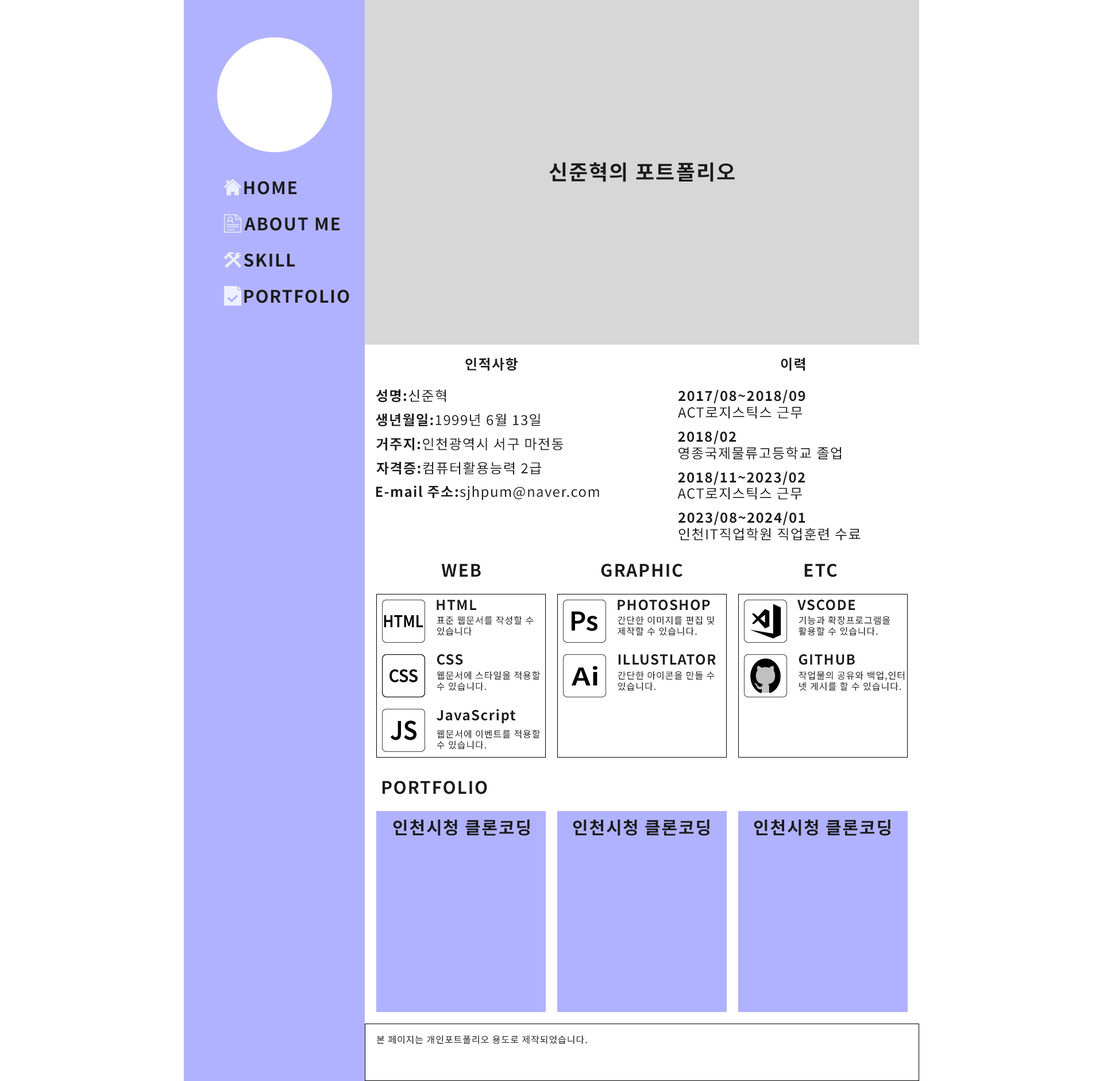
<style>
.page{position:relative;width:1103px;height:1081px;background:#ffffff}
.page>*{position:absolute;margin:0}
.t1{font:20.7px "NotoSansKR-Bold";letter-spacing:0.06em;color:#1b1b1b}
.t2{font:17.2px "NotoSansKR-Bold";letter-spacing:0.06em;color:#1b1b1b}
.t3{font:13.8px "NotoSansKR-Bold";letter-spacing:0.06em;color:#1b1b1b}
.t4{font:13.8px "NotoSansKR-Regular";letter-spacing:0.06em;color:#1b1b1b}
.t5{font:9.2px "NotoSansKR-Regular";letter-spacing:0.06em;color:#1b1b1b}
</style>
<div class="page">
<p class="t1" style="left:549px;top:162px;width:186px;height:20px">신준혁의 포트폴리오</p>
<p class="t2" style="left:244px;top:181px;width:53px;height:14px">HOME</p>
<p class="t2" style="left:244px;top:217px;width:96px;height:14px">ABOUT ME</p>
<p class="t2" style="left:244px;top:253px;width:51px;height:14px">SKILL</p>
<p class="t2" style="left:244px;top:290px;width:105px;height:13px">PORTFOLIO</p>
<p class="t3" style="left:465px;top:357px;width:53px;height:14px">인적사항</p>
<p class="t3" style="left:781px;top:357px;width:24px;height:14px">이력</p>
<p class="t3" style="left:376px;top:389px;width:70px;height:14px">성명:<span class="t4">신준혁</span></p>
<p class="t3" style="left:678px;top:389px;width:127px;height:30px">2017/08~2018/09<br><span class="t4">ACT로지스틱스 근무</span></p>
<p class="t4" style="left:376px;top:414px;width:165px;height:13px"><span class="t3">생년월일:</span>1999년 6월 13일</p>
<p class="t4" style="left:376px;top:438px;width:188px;height:13px"><span class="t3">거주지:</span>인천광역시 서구 마전동</p>
<p class="t4" style="left:678px;top:430px;width:163px;height:30px"><span class="t3">2018/02<br></span>영종국제물류고등학교 졸업</p>
<p class="t4" style="left:376px;top:462px;width:165px;height:13px"><span class="t3">자격증:</span>컴퓨터활용능력 2급</p>
<p class="t3" style="left:677px;top:471px;width:128px;height:29px">2018/11~2023/02<br><span class="t4">ACT로지스틱스 근무</span></p>
<p class="t4" style="left:376px;top:485px;width:223px;height:15px"><span class="t3">E-mail 주소:</span>sjhpum@naver.com</p>
<p class="t4" style="left:678px;top:511px;width:183px;height:30px"><span class="t3">2023/08~2024/01<br></span>인천IT직업학원 직업훈련 수료</p>
<p class="t2" style="left:441px;top:564px;width:40px;height:13px">WEB</p>
<p class="t2" style="left:601px;top:564px;width:81px;height:13px">GRAPHIC</p>
<p class="t2" style="left:804px;top:564px;width:33px;height:13px">ETC</p>
<p class="t3" style="left:437px;top:600px;width:39px;height:10px">HTML</p>
<p class="t3" style="left:618px;top:600px;width:92px;height:11px">PHOTOSHOP</p>
<p class="t3" style="left:797px;top:600px;width:58px;height:11px">VSCODE</p>
<p class="t5" style="left:437px;top:616px;width:97px;height:20px">표준 웹문서를 작성할 수 <br>있습니다</p>
<p class="t5" style="left:618px;top:616px;width:96px;height:20px">간단한 이미지를 편집 및<br>제작할 수 있습니다.</p>
<p class="t5" style="left:798px;top:616px;width:92px;height:20px">기능과 확장프로그램을<br>활용할 수 있습니다.</p>
<p class="t3" style="left:437px;top:654px;width:26px;height:11px">CSS</p>
<p class="t3" style="left:618px;top:654px;width:98px;height:11px">ILLUSTLATOR</p>
<p class="t3" style="left:798px;top:654px;width:57px;height:11px">GITHUB</p>
<p class="t5" style="left:437px;top:671px;width:103px;height:20px">웹문서에 스타일을 적용할 <br>수 있습니다.</p>
<p class="t5" style="left:618px;top:671px;width:97px;height:20px">간단한 아이콘을 만들 수<br>있습니다.</p>
<p class="t5" style="left:798px;top:671px;width:107px;height:20px">작업물의 공유와 백업,인터<br>넷 게시를 할 수 있습니다.</p>
<p class="t3" style="left:437px;top:709px;width:79px;height:15px">JavaScript</p>
<p class="t5" style="left:437px;top:730px;width:103px;height:20px">웹문서에 이벤트를 적용할 <br>수 있습니다.</p>
<p class="t2" style="left:382px;top:781px;width:105px;height:13px">PORTFOLIO</p>
<p class="t2" style="left:393px;top:819px;width:137px;height:17px">인천시청 클론코딩</p>
<p class="t2" style="left:573px;top:819px;width:136px;height:17px">인천시청 클론코딩</p>
<p class="t2" style="left:754px;top:819px;width:136px;height:17px">인천시청 클론코딩</p>
<p class="t5" style="left:376px;top:1035px;width:211px;height:9px">본 페이지는 개인포트폴리오 용도로 제작되었습니다.</p>
</div>
